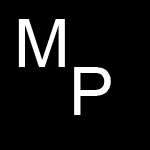
<style>
.page{position:relative;width:150px;height:150px;background:#000000}
.page>*{position:absolute;margin:0}
.t1{font:66.7px "ArialMT";color:#ffffff}
</style>
<div class="page">
<p class="t1" style="left:18px;top:19px;width:47px;height:48px">M</p>
<p class="t1" style="left:74px;top:67px;width:37px;height:48px">P</p>
</div>
